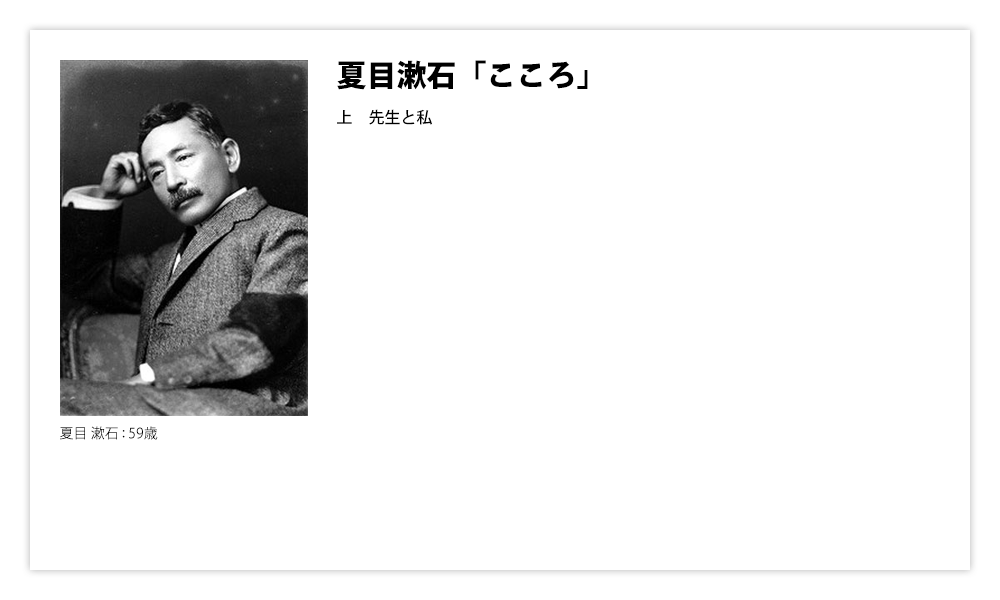
<style>
.page{position:relative;width:1000px;height:600px;background:#ffffff}
.page>*{position:absolute;margin:0}
.t1{font:30px "KozGoPr6N-Heavy";color:#000000}
.t2{font:16px "KozGoPr6N-Medium";color:#000000}
.t3{font:14px "KozGoPr6N-Regular";color:#000000}
</style>
<div class="page">
<p class="t1" style="left:337px;top:60px;width:251px;height:30px">夏目漱石「こころ」</p>
<p class="t2" style="left:337px;top:109px;width:95px;height:16px">上　先生と私</p>
<p class="t3" style="left:60px;top:426px;width:98px;height:14px">夏目 漱石 : 59歳</p>
</div>
